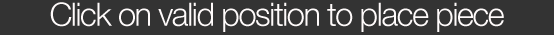
<style>
.page{position:relative;width:554px;height:35px;background:#333333}
.page>*{position:absolute;margin:0}
.t1{font:32.1px "HelveticaNeue-Light";letter-spacing:-0.04em;color:#fffbfb}
</style>
<div class="page">
<p class="t1" style="left:50px;top:2px;width:454px;height:30px">Click on valid position to place piece</p>
</div>
